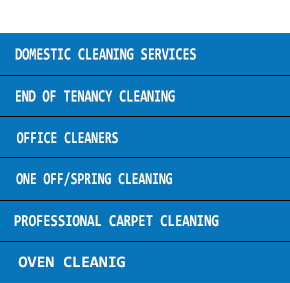
<style>
.page{position:relative;width:290px;height:283px;background:#0875ba}
.page>*{position:absolute;margin:0}
.t1{font:17.3px "Consolas-Bold";color:#ffffff;text-transform:uppercase;scale:0.73 1}
.t2{font:16.9px "Consolas-Bold";color:#ffffff;text-transform:uppercase;scale:0.73 1}
.t3{font:16.9px "Consolas-Bold";color:#ffffff;text-transform:uppercase;scale:0.79 1}
.t4{font:16px "Consolas-Bold";color:#ffffff;text-transform:uppercase}
</style>
<div class="page">
<p class="t1" style="left:15px;top:48px;width:181px;height:12px">DOMESTIC CLEANING SERVICES</p>
<p class="t1" style="left:16px;top:90px;width:159px;height:12px">END OF TENANCY CLEANING</p>
<p class="t2" style="left:17px;top:132px;width:101px;height:12px">OFFICE CLEANERS</p>
<p class="t2" style="left:16px;top:172px;width:156px;height:14px">ONE OFF/SPRING CLEANING</p>
<p class="t3" style="left:14px;top:215px;width:205px;height:12px">professional carpet cleaning</p>
<p class="t4" style="left:18px;top:256px;width:107px;height:12px">OVEN CLEANig</p>
</div>
